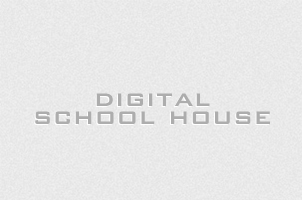
<style>
.page{position:relative;width:302px;height:200px}
.page>*{position:absolute;margin:0}
.t1{font:29px "BankGothic-Medium";letter-spacing:0.04em;color:#adadad}
</style>
<div class="page">
<p class="t1" style="left:35px;top:93px;width:235px;height:31px">digital school house</p>
</div>
